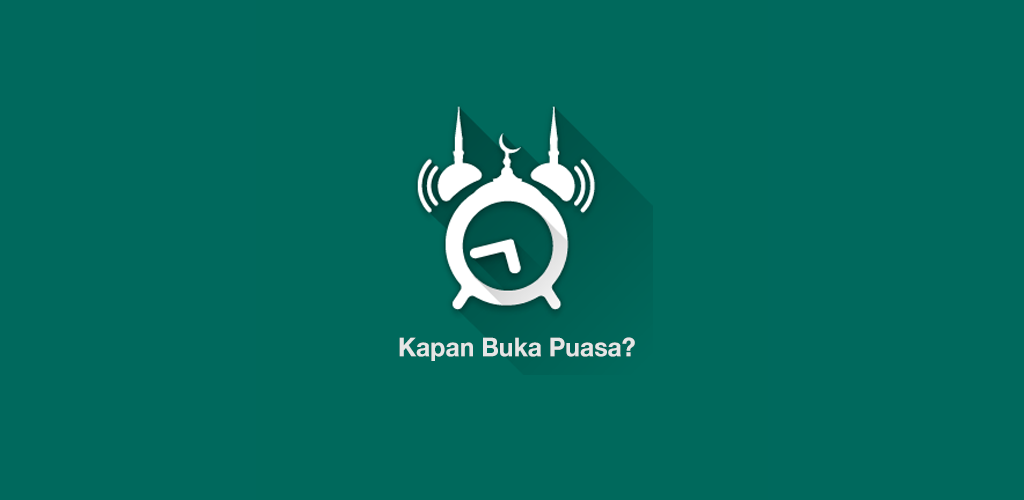
<style>
.page{position:relative;width:1024px;height:500px;background:#00695d}
.page>*{position:absolute;margin:0}
.t1{font:25.8px "HelveticaNeue-Bold";color:#e6e6e6;scale:0.96 1}
</style>
<div class="page">
<p class="t1" style="left:399px;top:337px;width:236px;height:24px">Kapan Buka Puasa?</p>
</div>
